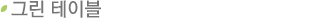
<style>
.page{position:relative;width:336px;height:18px;background:#ffffff}
.page>*{position:absolute;margin:0}
.t1{font:19px "RixGoM";color:#757575}
</style>
<div class="page">
<p class="t1" style="left:11px;top:0px;width:90px;height:18px">그린 테이블</p>
</div>
